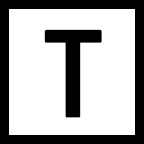
<style>
.page{position:relative;width:144px;height:144px;background:#ffffff}
.page>*{position:absolute;margin:0}
.t1{font:125px "BarlowSemiCondensed-SemiBold";color:#000000}
</style>
<div class="page">
<p class="t1" style="left:44px;top:29px;width:58px;height:89px">T</p>
</div>
